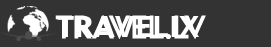
<style>
.page{position:relative;width:271px;height:47px;background:#333333}
.page>*{position:absolute;margin:0}
.t1{font:29px "LEMONMILK-Regular";color:#ffffff}
</style>
<div class="page">
<p class="t1" style="left:55px;top:15px;width:151px;height:24px">TRAVEL.LV</p>
</div>
